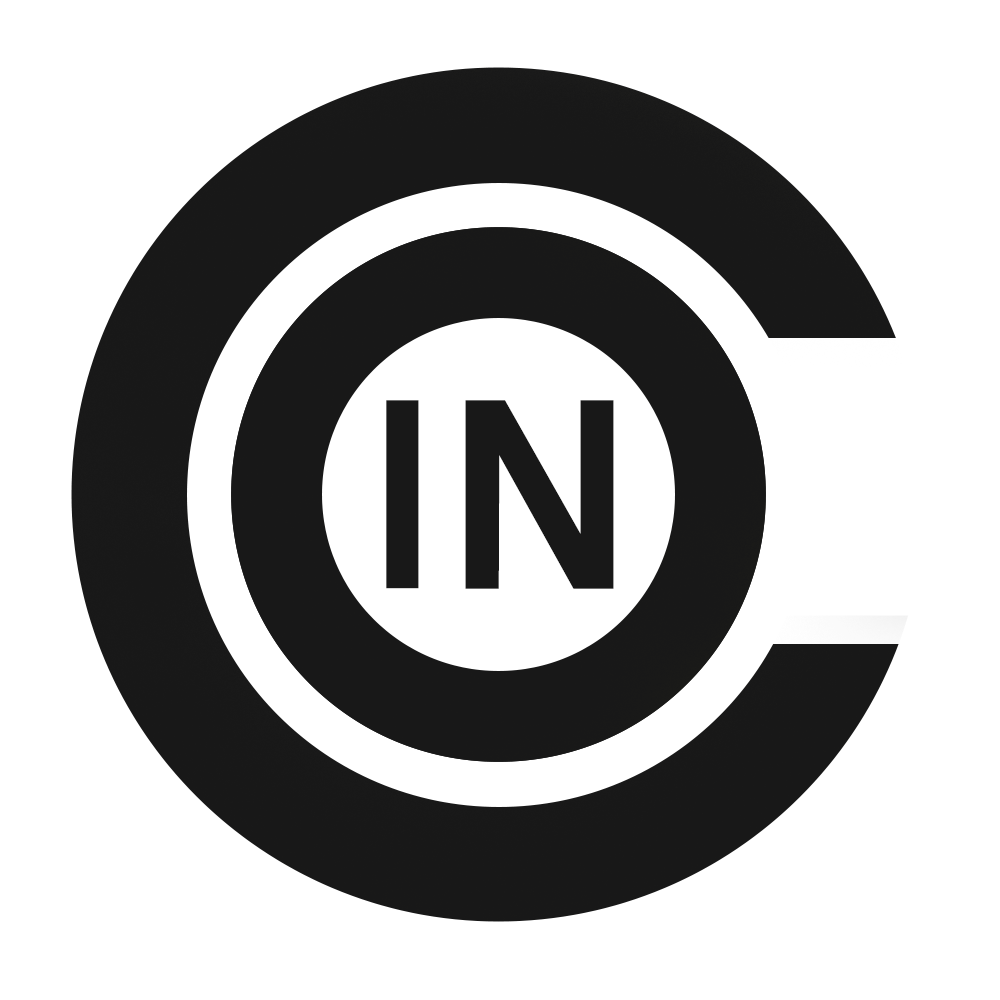
<style>
.page{position:relative;width:1000px;height:1000px;background:#ffffff}
.page>*{position:absolute;margin:0}
.t1{font:250px "YDIYGO350";letter-spacing:0.04em;color:#181818}
</style>
<div class="page">
<p class="t1" style="left:386px;top:400px;width:228px;height:189px">IN</p>
</div>
